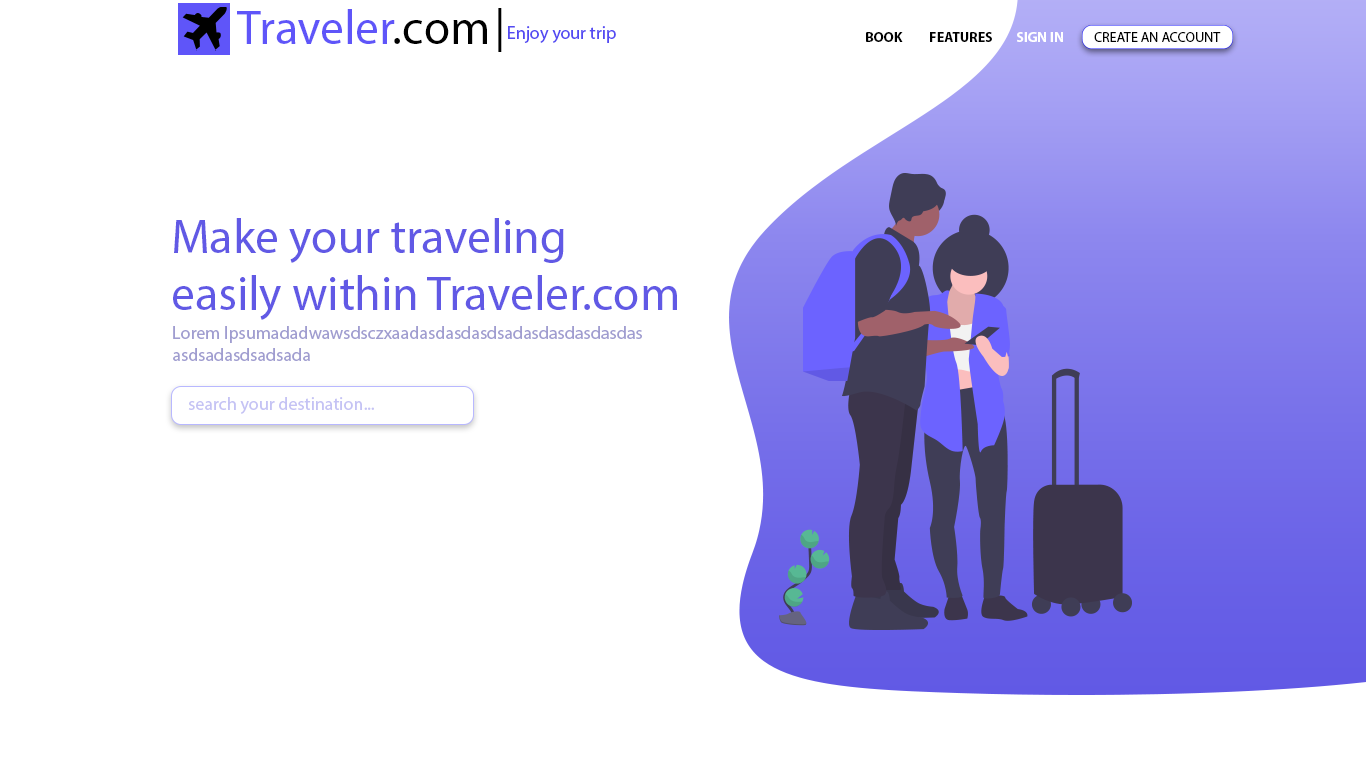
<style>
.page{position:relative;width:1366px;height:768px;background:#ffffff}
.page>*{position:absolute;margin:0}
.t1{font:48px "MyriadPro-Regular";color:#5f55f9}
.t2{font:48px "MyriadPro-Regular";color:#000000}
.t3{font:48px "LucidaBright";color:#000000}
.t4{font:18px "MyriadPro-Regular";color:#544af2}
.t5{font:14px "MyriadPro-Bold";color:#000000}
.t6{font:14px "MyriadPro-Bold";color:#ffffff}
.t7{font:14px "MyriadPro-Regular";color:#000000}
.t8{font:48px "MyriadPro-Regular";color:#6159e5}
.t9{font:18px "MyriadPro-Regular";color:#a09dd0}
.t10{font:18px "MyriadPro-Regular";color:#c5c3f4}
</style>
<div class="page">
<p class="t1" style="left:237px;top:9px;width:250px;height:35px">Traveler<span class="t2">.com</span></p>
<p class="t3" style="left:498px;top:8px;width:4px;height:44px">|</p>
<p class="t4" style="left:508px;top:26px;width:108px;height:17px">Enjoy your trip</p>
<p class="t5" style="left:866px;top:32px;width:37px;height:10px">BOOK</p>
<p class="t5" style="left:930px;top:32px;width:62px;height:10px">FEATURES</p>
<p class="t6" style="left:1017px;top:32px;width:46px;height:10px">SIGN IN</p>
<p class="t7" style="left:1094px;top:32px;width:127px;height:10px">CREATE AN ACCOUNT</p>
<p class="t8" style="left:173px;top:218px;width:504px;height:102px">Make your traveling<br>easily within Traveler.com</p>
<p class="t9" style="left:173px;top:326px;width:469px;height:35px">Lorem Ipsumadadwawsdsczxaadasdasdasdsadasdasdasdasdas<br>asdsadasdsadsada</p>
<p class="t10" style="left:188px;top:397px;width:186px;height:17px">search your destination...</p>
</div>
